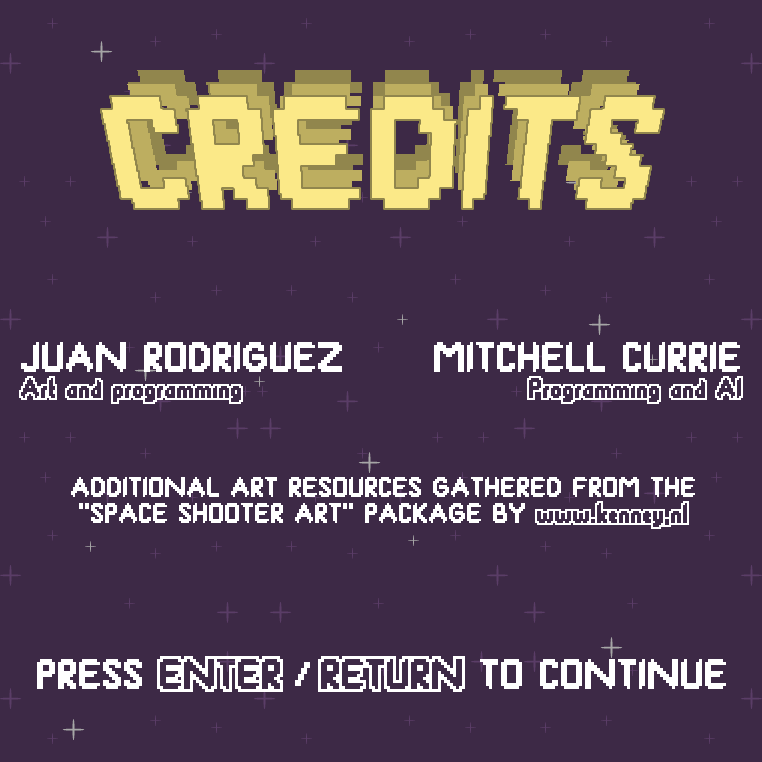
<style>
.page{position:relative;width:762px;height:762px;background:#3d2946}
.page>*{position:absolute;margin:0}
.t1{font:22px "SmackyFormulaOut";color:#ffffff}
.t2{font:33px "SmackyFormula";color:#ffffff}
.t3{font:22px "SmackyFormula";color:#ffffff}
.t4{font:33px "SmackyFormulaOut";color:#ffffff}
.t5{font:33px "SmackyFormula";letter-spacing:-0.1em;color:#ffffff}
</style>
<div class="page">
<p class="t1" style="left:19px;top:342px;width:323px;height:62px"><span class="t2">JUAN RODRIGUEZ<br></span>Art and programming</p>
<p class="t1" style="left:434px;top:342px;width:309px;height:62px;text-align:right"><span class="t2">MITCHELL CURRIE<br></span>Programming and AI</p>
<p class="t3" style="left:71px;top:477px;width:624px;height:52px;text-align:center">ADDITIONAL ART RESOURCES GATHERED FROM THE<br>"SPACE SHOOTER ART" PACKAGE BY <span class="t1">www.kenney,nl</span></p>
<p class="t2" style="left:37px;top:656px;width:689px;height:36px">PRESS <span class="t4">ENTER</span><span class="t5"> / </span><span class="t4">RETURN</span> TO CONTINUE</p>
</div>
